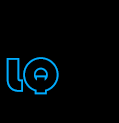
<style>
.page{position:relative;width:119px;height:123px;background:#000000}
.page>*{position:absolute;margin:0}
.t1{font:48px "STCaiyun";letter-spacing:0.02em;color:#00adfe}
</style>
<div class="page">
<p class="t1" style="left:6px;top:57px;width:53px;height:38px">LQ</p>
</div>
